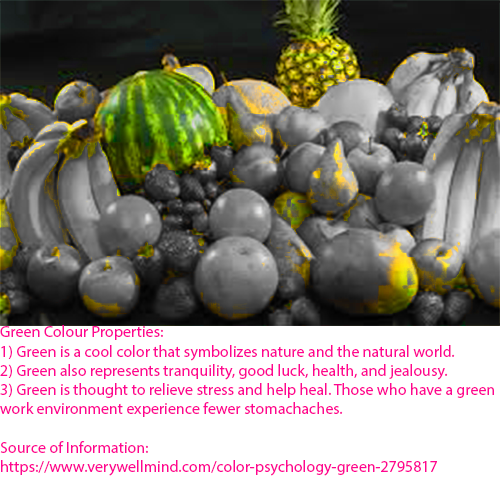
<style>
.page{position:relative;width:500px;height:500px;background:#ffffff}
.page>*{position:absolute;margin:0}
.t1{font:16px "MyriadPro-Regular";color:#ff0592}
</style>
<div class="page">
<p class="t1" style="left:0px;top:325px;width:494px;height:151px">Green Colour Properties:<br>1) Green is a cool color that symbolizes nature and the natural world.<br>2) Green also represents tranquility, good luck, health, and jealousy.<br>3) Green is thought to relieve stress and help heal. Those who have a green work environment experience fewer stomachaches.<br><br>Source of Information:<br>https://www.verywellmind.com/color-psychology-green-2795817</p>
</div>
